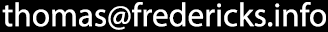
<style>
.page{position:relative;width:328px;height:32px;background:#000000}
.page>*{position:absolute;margin:0}
.t1{font:33.3px "MyriadPro-Regular";color:#ffffff}
</style>
<div class="page">
<p class="t1" style="left:2px;top:2px;width:324px;height:28px">thomas@fredericks.info</p>
</div>
